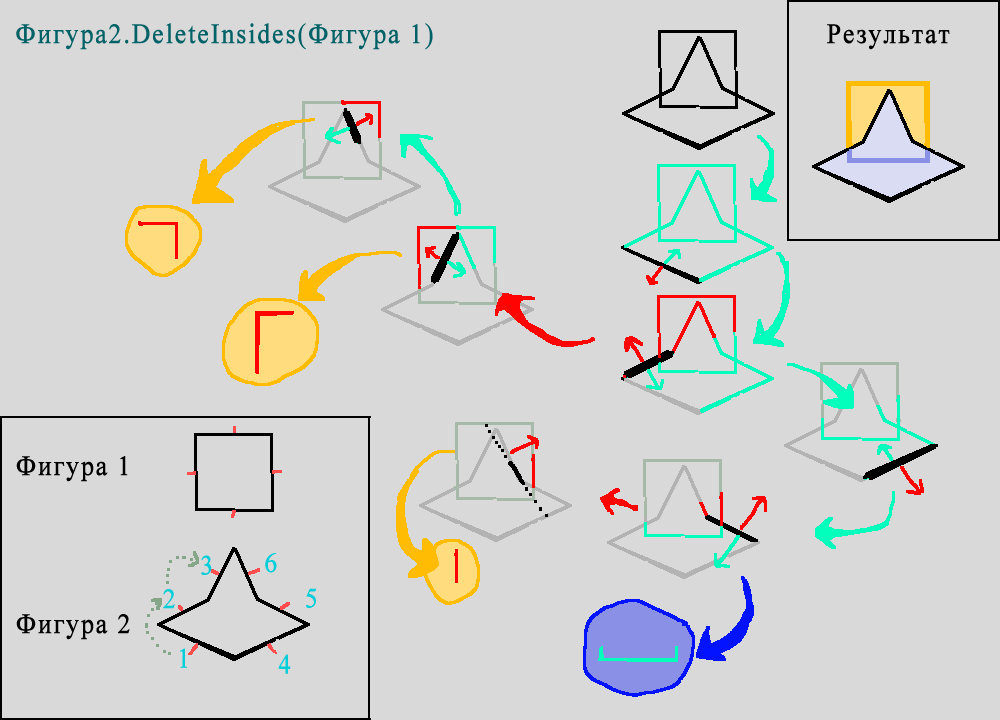
<style>
.page{position:relative;width:1000px;height:720px;background:#d9d9d9}
.page>*{position:absolute;margin:0}
.t1{font:28px "TimesNewRomanPSMT";letter-spacing:0.06em;color:#006166;font-weight:bold;scale:0.9 1}
.t2{font:28px "TimesNewRomanPSMT";letter-spacing:0.06em;color:#000000;font-weight:bold;scale:0.9 1}
</style>
<div class="page">
<p class="t1" style="left:16px;top:23px;width:417px;height:27px">Фигура2.DeleteInsides(Фигура 1)</p>
<p class="t2" style="left:827px;top:24px;width:123px;height:26px">Результат</p>
<p class="t2" style="left:16px;top:456px;width:112px;height:26px">Фигура 1</p>
<p class="t2" style="left:16px;top:614px;width:114px;height:26px">Фигура 2</p>
</div>
